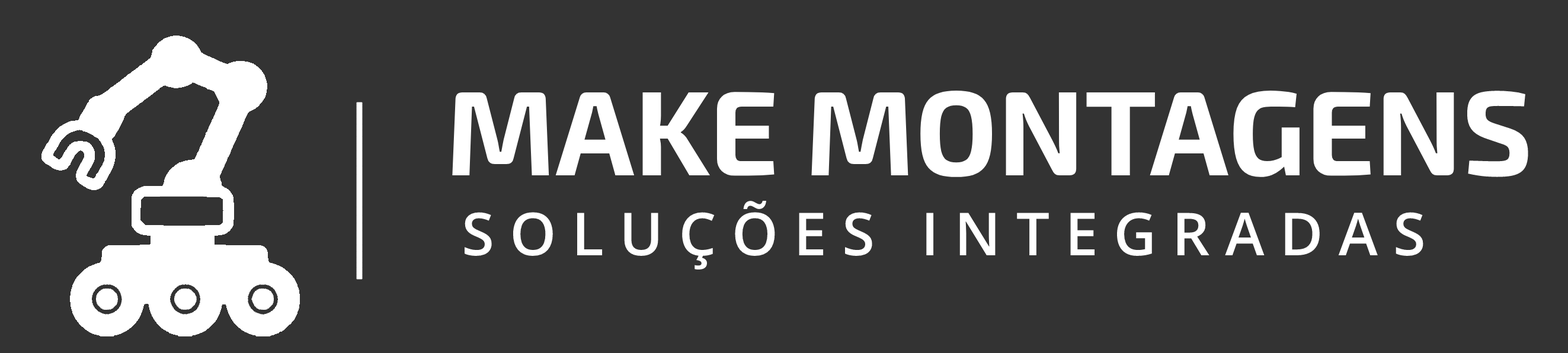
<style>
.page{position:relative;width:1568px;height:353px;background:#333333}
.page>*{position:absolute;margin:0}
.t1{font:120.3px "Exo2-Bold";color:#ffffff}
.t2{font:59.3px "OpenSans-SemiBold";color:#ffffff}
</style>
<div class="page">
<p class="t1" style="left:452px;top:91px;width:1076px;height:86px">MAKE MONTAGENS</p>
<p class="t2" style="left:464px;top:201px;width:959px;height:69px">S O L U Ç Õ E S   I N T E G R A D A S</p>
</div>
